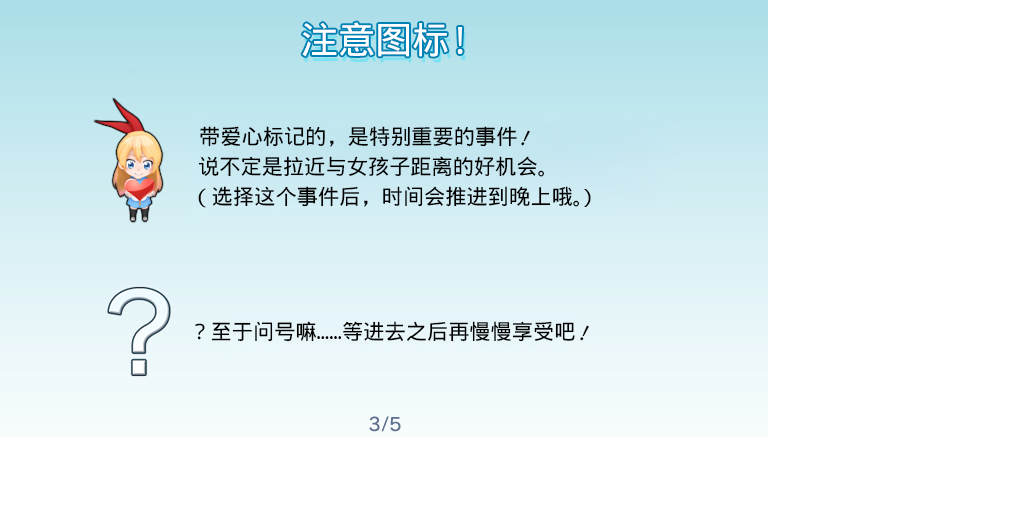
<style>
.page{position:relative;width:1024px;height:512px;background:#ffffff}
.page>*{position:absolute;margin:0}
.t1{font:37.3px "WenQuanYiMicroHeiMono";letter-spacing:-0.005em;color:#ffffff}
.t2{font:21.3px "WenQuanYiMicroHeiMono";letter-spacing:-0.005em;color:#000000}
</style>
<div class="page">
<p class="t1" style="left:302px;top:22px;width:161px;height:35px">注意图标!</p>
<p class="t2" style="left:200px;top:126px;width:317px;height:21px">带爱心标记的，是特别重要的事件</p>
<p class="t2" style="left:521px;top:130px;width:9px;height:16px;rotate:26deg">!</p>
<p class="t2" style="left:198px;top:156px;width:347px;height:21px">说不定是拉近与女孩子距离的好机会。</p>
<p class="t2" style="left:198px;top:186px;width:382px;height:22px">（选择这个事件后，时间会推进到晚上哦。</p>
<p class="t2" style="left:584px;top:189px;width:7px;height:18px">)</p>
<p class="t2" style="left:195px;top:321px;width:380px;height:21px">？至于问号嘛……等进去之后再慢慢享受吧</p>
<p class="t2" style="left:580px;top:325px;width:9px;height:16px;rotate:26deg">!</p>
</div>
